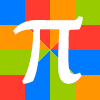
<style>
.page{position:relative;width:100px;height:100px;background:#007aff}
.page>*{position:absolute;margin:0}
.t1{font:140px "MinionPro-Regular";color:#ffffff}
</style>
<div class="page">
<p class="t1" style="left:13px;top:16px;width:70px;height:68px">π</p>
</div>
